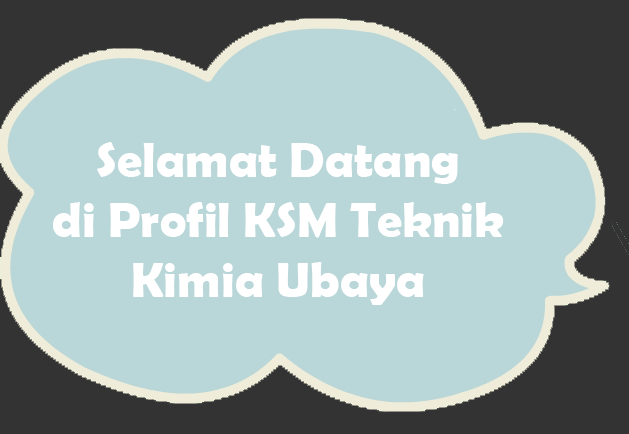
<style>
.page{position:relative;width:629px;height:434px;background:#b9d7d9}
.page>*{position:absolute;margin:0}
.t1{font:50px "BerlinSansFBDemi-Bold";color:#ffffff}
</style>
<div class="page">
<p class="t1" style="left:53px;top:142px;width:451px;height:163px;text-align:center">Selamat Datang<br>di Profil KSM Teknik<br>Kimia Ubaya</p>
</div>
